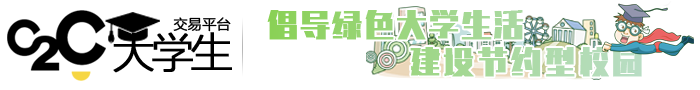
<style>
.page{position:relative;width:700px;height:90px;background:#ffffff}
.page>*{position:absolute;margin:0}
.t1{font:14px "FZLTXHK--GBK1-0";color:#000000;font-weight:bold}
.t2{font:30px "REEJI-JinGang-ExtraBoldGB1.0";letter-spacing:0.05em;font-weight:bold}
.t3{font:42px "FZLTXHK--GBK1-0";letter-spacing:-0.1em;color:#000000;font-weight:bold}
.t4{font:30px "REEJI-JinGang-ExtraBoldGB1.0";letter-spacing:0.1em;font-weight:bold}
</style>
<div class="page">
<p class="t1" style="left:173px;top:17px;width:58px;height:15px">交易平台</p>
<p class="t2" style="left:267px;top:10px;width:257px;height:30px">倡导绿色大学生活</p>
<p class="t3" style="left:113px;top:32px;width:119px;height:41px">大学生</p>
<p class="t4" style="left:410px;top:47px;width:232px;height:30px">建设节约型校园</p>
</div>
